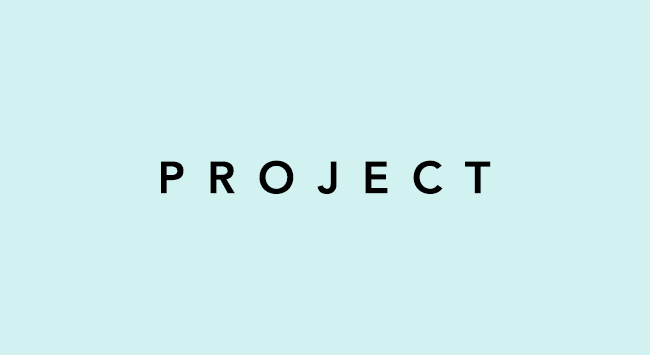
<style>
.page{position:relative;width:650px;height:355px;background:#d1f2f1}
.page>*{position:absolute;margin:0}
.t1{font:44.6px "Avenir-Heavy";letter-spacing:0.5em;color:#000000;text-transform:uppercase}
</style>
<div class="page">
<p class="t1" style="left:161px;top:160px;width:330px;height:34px">PROJECT</p>
</div>
